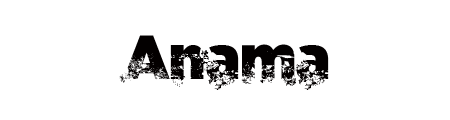
<style>
.page{position:relative;width:450px;height:120px;background:#ffffff}
.page>*{position:absolute;margin:0}
.t1{font:57.1px "C.A.Gatintas";color:#030000}
</style>
<div class="page">
<p class="t1" style="left:119px;top:35px;width:210px;height:55px">Anama</p>
</div>
